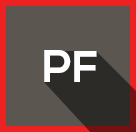
<style>
.page{position:relative;width:136px;height:132px;background:#5b5750}
.page>*{position:absolute;margin:0}
.t1{font:44.4px "NexaBold";color:#ffffff}
</style>
<div class="page">
<p class="t1" style="left:44px;top:50px;width:53px;height:32px">PF</p>
</div>
